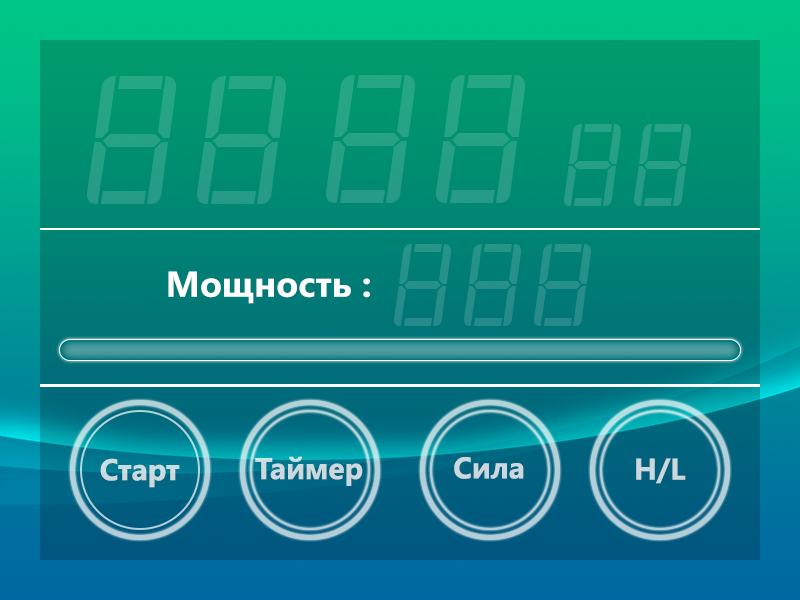
<style>
.page{position:relative;width:800px;height:600px}
.page>*{position:absolute;margin:0}
.t1{font:35.9px "SegoeUI-Bold";color:#ffffff}
.t2{font:30px "SegoeUI-Bold";color:#cbdde2}
.t3{font:30px "SegoeUI-Bold";color:#cbd9de}
.t4{font:30px "SegoeUI-Bold";color:#cbd8de}
.t5{font:30px "SegoeUI-Bold";color:#cbd8dd}
</style>
<div class="page">
<p class="t1" style="left:168px;top:271px;width:202px;height:33px">Мощность :</p>
<p class="t2" style="left:100px;top:458px;width:80px;height:30px">Старт</p>
<p class="t3" style="left:255px;top:456px;width:108px;height:30px">Таймер</p>
<p class="t4" style="left:454px;top:457px;width:70px;height:22px">Сила</p>
<p class="t5" style="left:636px;top:458px;width:50px;height:26px">H/L</p>
</div>
